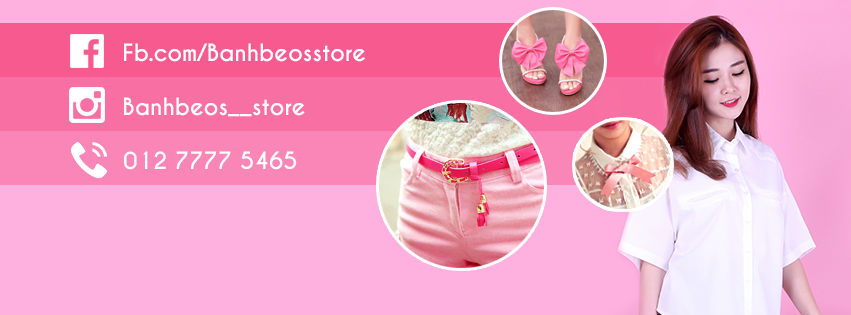
<style>
.page{position:relative;width:851px;height:315px;background:#feb1df}
.page>*{position:absolute;margin:0}
.t1{font:22.3px "CaviarDreams-Bold";color:#ffffff}
</style>
<div class="page">
<p class="t1" style="left:124px;top:43px;width:241px;height:19px">Fb.com/Banhbeosstore</p>
<p class="t1" style="left:124px;top:97px;width:181px;height:20px">Banhbeos__store</p>
<p class="t1" style="left:124px;top:151px;width:173px;height:19px">012 7777 5465</p>
</div>
